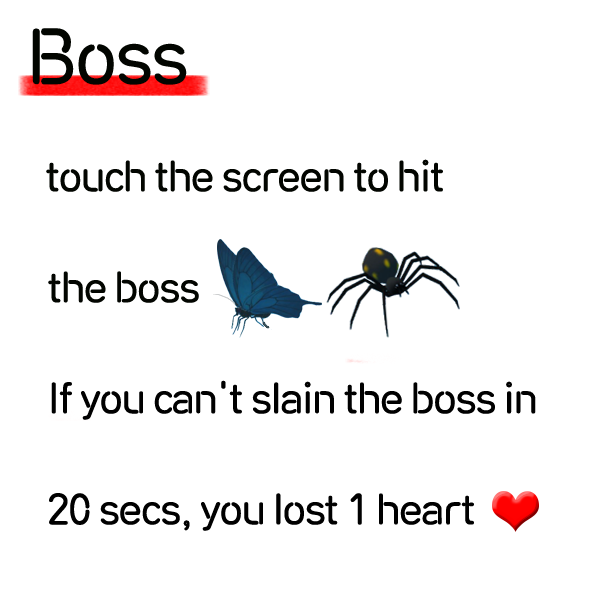
<style>
.page{position:relative;width:600px;height:600px;background:#ffffff}
.page>*{position:absolute;margin:0}
.t1{font:72px "RixNeonSignB";letter-spacing:-0.05em;color:#020500}
.t2{font:40px "RixNeonSignB";letter-spacing:-0.05em;color:#020500}
.t3{font:40px "RixNeonSignB";letter-spacing:-0.05em;color:#000000}
</style>
<div class="page">
<p class="t1" style="left:32px;top:28px;width:155px;height:57px">Boss</p>
<p class="t2" style="left:46px;top:159px;width:397px;height:33px">touch the screen to hit</p>
<p class="t2" style="left:48px;top:271px;width:151px;height:32px">the boss</p>
<p class="t3" style="left:51px;top:380px;width:485px;height:40px">If you can't slain the boss in</p>
<p class="t3" style="left:49px;top:493px;width:425px;height:38px">20 secs, you lost 1 heart</p>
</div>
